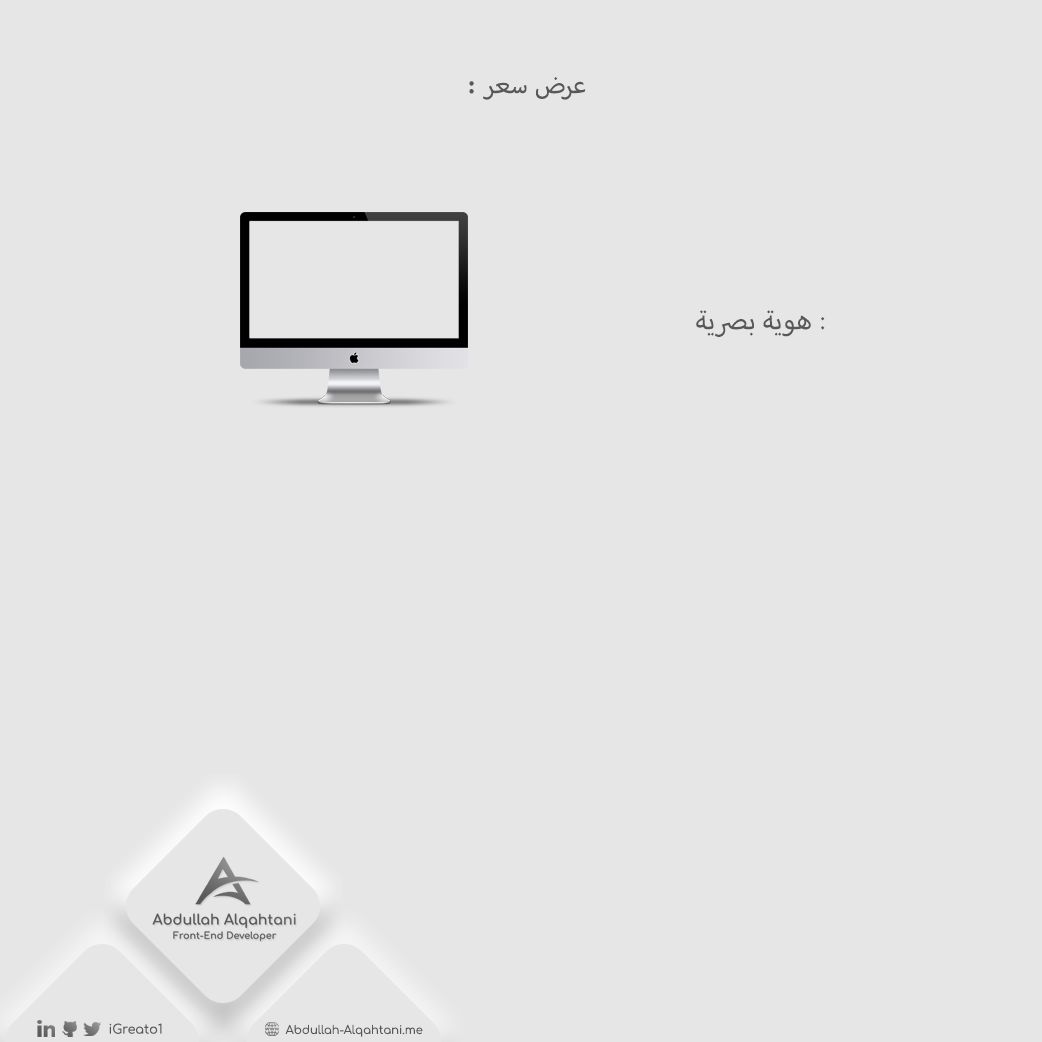
<style>
.page{position:relative;width:1042px;height:1042px;background:#e6e6e6}
.page>*{position:absolute;margin:0}
.t1{font:36px "MyriadArabic-Regular";color:#585858}
.t2{font:12.9px "Comfortaa-Regular";color:#585858}
.t3{font:11.5px "Comfortaa-Regular";color:#585858}
</style>
<div class="page">
<p class="t1" style="left:469px;top:77px;width:117px;height:23px">عرض سعر :</p>
<p class="t1" style="left:696px;top:310px;width:129px;height:27px">هوية بصرية :</p>
<p class="t2" style="left:109px;top:1023px;width:53px;height:11px">iGreato1</p>
<p class="t3" style="left:285px;top:1024px;width:138px;height:13px">Abdullah-Alqahtani.me</p>
</div>
